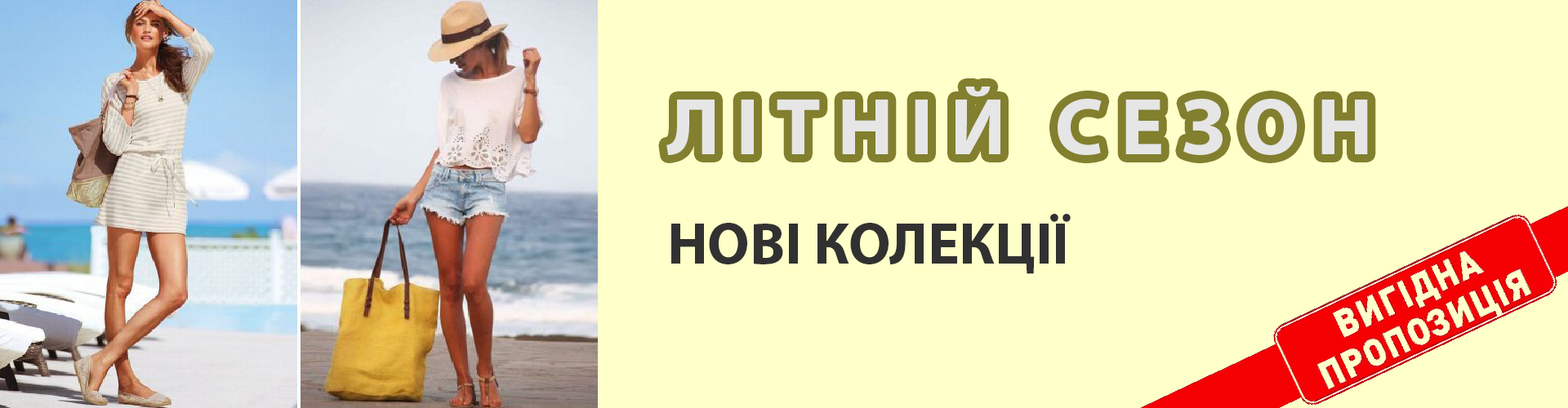
<style>
.page{position:relative;width:1568px;height:408px;background:#ffffca}
.page>*{position:absolute;margin:0}
.t1{font:81.7px "MyriadPro-Bold";color:#e6e6e6}
.t2{font:58.8px "MyriadPro-Bold";color:#323131}
</style>
<div class="page">
<p class="t1" style="left:666px;top:87px;width:702px;height:68px">Л І Т Н І Й   С Е З О Н</p>
<p class="t2" style="left:671px;top:214px;width:400px;height:60px">НОВІ КОЛЕКЦІЇ</p>
</div>
